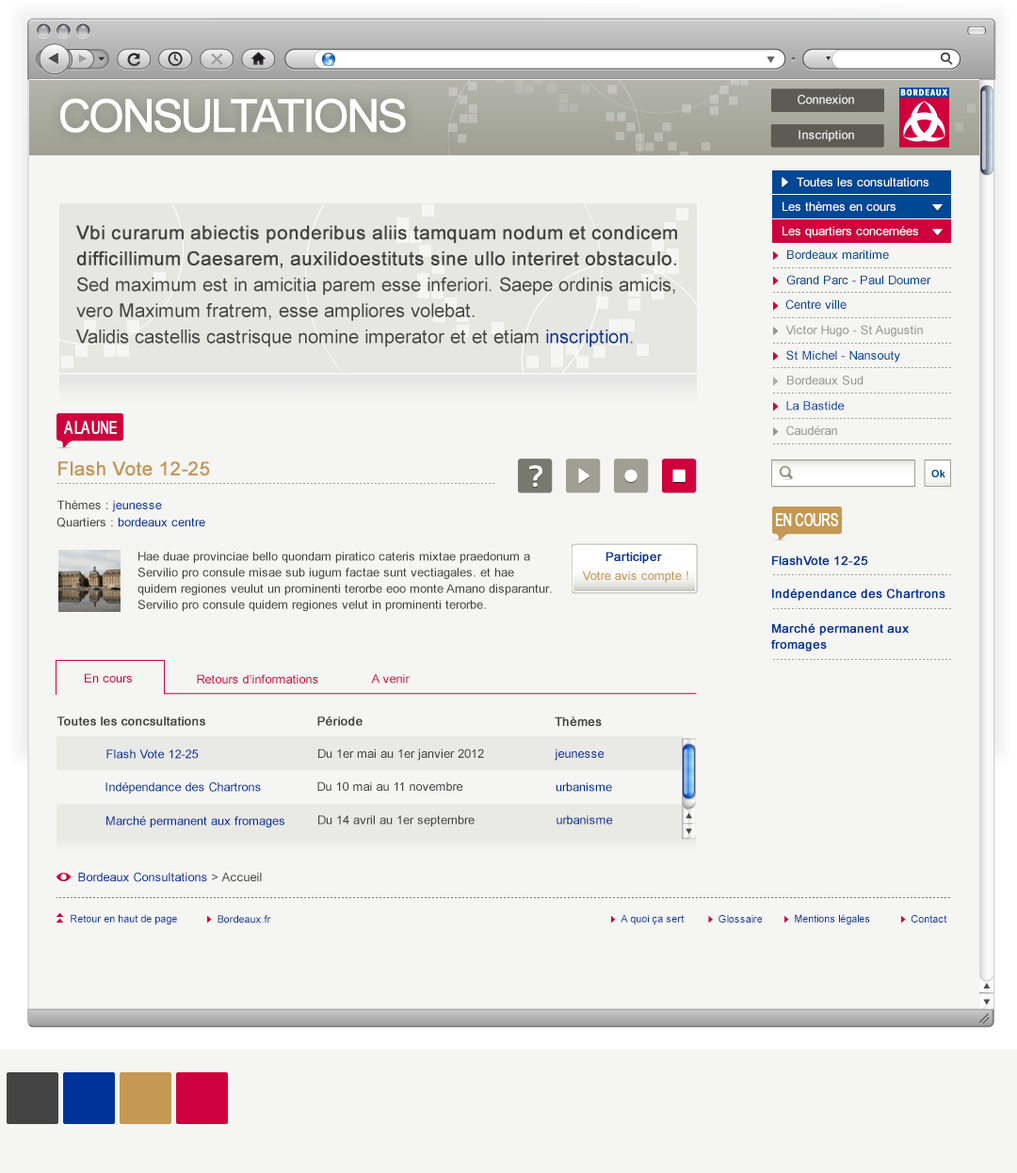
<style>
.page{position:relative;width:1017px;height:1173px;background:#f5f5f4}
.page>*{position:absolute;margin:0}
.t1{font:45.2px "ArialMT";letter-spacing:-0.075em;color:#ffffff;font-weight:bold}
.t2{font:12.2px "ArialMT";color:#f5f5f4}
.t3{font:12.2px "ArialMT";color:#ffffff}
.t4{font:18.8px/14.7px "ArialMT";color:#444444}
.t5{font:18.8px/14.7px "ArialMT";color:#444444;font-weight:bold}
.t6{font:18.8px/14.7px "ArialMT";color:#003399}
.t7{font:12.2px "ArialMT";color:#004794}
.t8{font:12.2px "ArialMT";color:#979797}
.t9{font:17.1px "ArialMT";letter-spacing:-0.05em;color:#ffffff;font-weight:bold;scale:0.71 1}
.t10{font:18.8px "ArialMT";color:#c59853;font-weight:bold}
.t11{font:12.2px "ArialMT";color:#444444}
.t12{font:12.2px "ArialMT";color:#003399}
.t13{font:12.2px/14.7px "ArialMT";color:#444444}
.t14{font:12.2px "ArialMT";color:#003399;font-weight:bold}
.t15{font:12.2px "ArialMT";color:#c59853}
.t16{font:12.2px/14.7px "ArialMT";color:#003399;font-weight:bold}
.t17{font:12.2px "ArialMT";color:#ce003d}
.t18{font:12.2px "ArialMT";color:#444444;font-weight:bold}
.t19{font:10.4px "ArialMT";color:#003399}
</style>
<div class="page">
<p class="t1" style="left:60px;top:98px;width:346px;height:35px">CONSULTATIONS</p>
<p class="t2" style="left:797px;top:94px;width:57px;height:10px">Connexion</p>
<p class="t2" style="left:798px;top:130px;width:56px;height:12px">Inscription</p>
<p class="t3" style="left:796px;top:177px;width:132px;height:9px">Toutes les consultations</p>
<p class="t3" style="left:782px;top:201px;width:113px;height:10px">Les thèmes en cours</p>
<p class="t4" style="left:75px;top:225px;width:602px;height:122px"><span class="t5">Vbi curarum abiectis ponderibus aliis tamquam nodum et condicem<br>difficillimum Caesarem, auxilidoestituts sine ullo interiret obstaculo.<br></span>Sed maximum est in amicitia parem esse inferiori. Saepe ordinis amicis,<br>vero Maximum fratrem, esse ampliores volebat.<br>Validis castellis castrisque nomine imperator et et etiam <span class="t6">inscription</span>.</p>
<p class="t3" style="left:782px;top:226px;width:136px;height:12px">Les quartiers concernées</p>
<p class="t7" style="left:787px;top:249px;width:102px;height:10px">Bordeaux maritime</p>
<p class="t7" style="left:786px;top:275px;width:145px;height:10px">Grand Parc - Paul Doumer</p>
<p class="t7" style="left:785px;top:299px;width:61px;height:11px">Centre ville</p>
<p class="t8" style="left:785px;top:325px;width:138px;height:12px">Victor Hugo - St Augustin</p>
<p class="t7" style="left:786px;top:350px;width:114px;height:12px">St Michel - Nansouty</p>
<p class="t8" style="left:787px;top:376px;width:76px;height:9px">Bordeaux Sud</p>
<p class="t7" style="left:786px;top:401px;width:58px;height:9px">La Bastide</p>
<p class="t9" style="left:64px;top:421px;width:53px;height:13px">A LA UNE</p>
<p class="t8" style="left:786px;top:425px;width:51px;height:11px">Caudéran</p>
<p class="t10" style="left:58px;top:461px;width:152px;height:15px">Flash Vote 12-25</p>
<p class="t11" style="left:57px;top:500px;width:105px;height:12px">Thèmes :<span class="t12"> jeunesse</span></p>
<p class="t12" style="left:56px;top:517px;width:149px;height:10px"><span class="t11">Quartiers : </span>bordeaux centre</p>
<p class="t9" style="left:776px;top:513px;width:62px;height:13px">EN COURS</p>
<p class="t13" style="left:137px;top:552px;width:415px;height:60px">Hae duae provinciae bello quondam piratico cateris mixtae praedonum a<br>Servilio pro consule misae sub iugum factae sunt vectiagales. et hae<br>quidem regiones veulut un prominenti terorbe eoo monte Amano disparantur.<br>Servilio pro consule quidem regiones velut in prominenti terorbe.</p>
<p class="t14" style="left:605px;top:552px;width:57px;height:12px">Participer</p>
<p class="t14" style="left:772px;top:555px;width:96px;height:11px">FlashVote 12-25</p>
<p class="t15" style="left:582px;top:570px;width:106px;height:13px">Votre avis compte !</p>
<p class="t14" style="left:772px;top:588px;width:173px;height:13px">Indépendance des Chartrons</p>
<p class="t16" style="left:771px;top:623px;width:137px;height:28px">Marché permanent aux<br>fromages</p>
<p class="t17" style="left:85px;top:673px;width:47px;height:9px">En cours</p>
<p class="t17" style="left:197px;top:674px;width:121px;height:9px">Retours d’informations</p>
<p class="t17" style="left:371px;top:674px;width:38px;height:9px">A venir</p>
<p class="t18" style="left:56px;top:716px;width:149px;height:10px">Toutes les concsultations</p>
<p class="t18" style="left:317px;top:716px;width:45px;height:10px">Période</p>
<p class="t18" style="left:554px;top:716px;width:48px;height:11px">Thèmes</p>
<p class="t12" style="left:106px;top:749px;width:93px;height:10px">Flash Vote 12-25</p>
<p class="t11" style="left:318px;top:748px;width:166px;height:13px">Du 1er mai au 1er janvier 2012</p>
<p class="t12" style="left:554px;top:748px;width:50px;height:13px">jeunesse</p>
<p class="t12" style="left:105px;top:782px;width:156px;height:12px">Indépendance des Chartrons</p>
<p class="t11" style="left:317px;top:781px;width:146px;height:10px">Du 10 mai au 11 novembre</p>
<p class="t12" style="left:555px;top:782px;width:57px;height:10px">urbanisme</p>
<p class="t12" style="left:106px;top:816px;width:178px;height:11px">Marché permanent aux fromages</p>
<p class="t11" style="left:318px;top:815px;width:156px;height:11px">Du 14 avril au 1er septembre</p>
<p class="t12" style="left:556px;top:815px;width:57px;height:10px">urbanisme</p>
<p class="t12" style="left:78px;top:872px;width:184px;height:10px">Bordeaux Consultations<span class="t11"> &gt; Accueil</span></p>
<p class="t19" style="left:71px;top:914px;width:106px;height:10px">Retour en haut de page</p>
<p class="t19" style="left:217px;top:915px;width:54px;height:8px">Bordeaux.fr</p>
<p class="t19" style="left:620px;top:914px;width:64px;height:11px">A quoi ça sert</p>
<p class="t19" style="left:718px;top:915px;width:44px;height:8px">Glossaire</p>
<p class="t19" style="left:794px;top:914px;width:76px;height:10px">Mentions légales</p>
<p class="t19" style="left:910px;top:915px;width:37px;height:8px">Contact</p>
</div>
